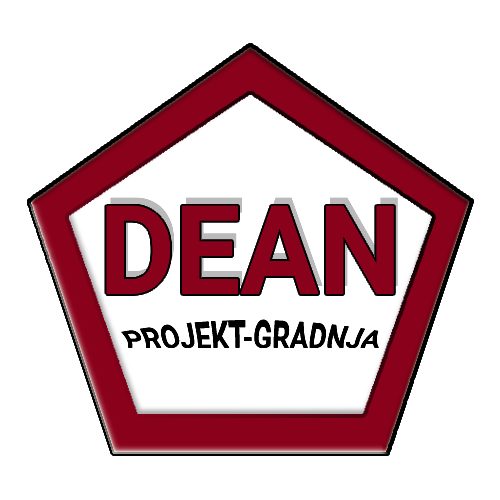
<style>
.page{position:relative;width:500px;height:500px;background:#ffffff}
.page>*{position:absolute;margin:0}
.t1{font:123.6px "Roboto-Bold";color:#8a011b;scale:0.94 1}
.t2{font:27px "Roboto-Bold";color:#000000}
</style>
<div class="page">
<p class="t1" style="left:106px;top:205px;width:288px;height:89px">DEAN</p>
<p class="t2" style="left:121px;top:319px;width:258px;height:30px">PROJEKT-GRADNJA</p>
</div>
